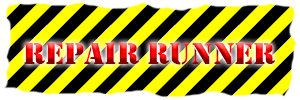
<style>
.page{position:relative;width:300px;height:100px;background:#000000}
.page>*{position:absolute;margin:0}
.t1{font:32px "Stencil"}
</style>
<div class="page">
<p class="t1" style="left:24px;top:43px;width:251px;height:22px">Repair Runner</p>
</div>
